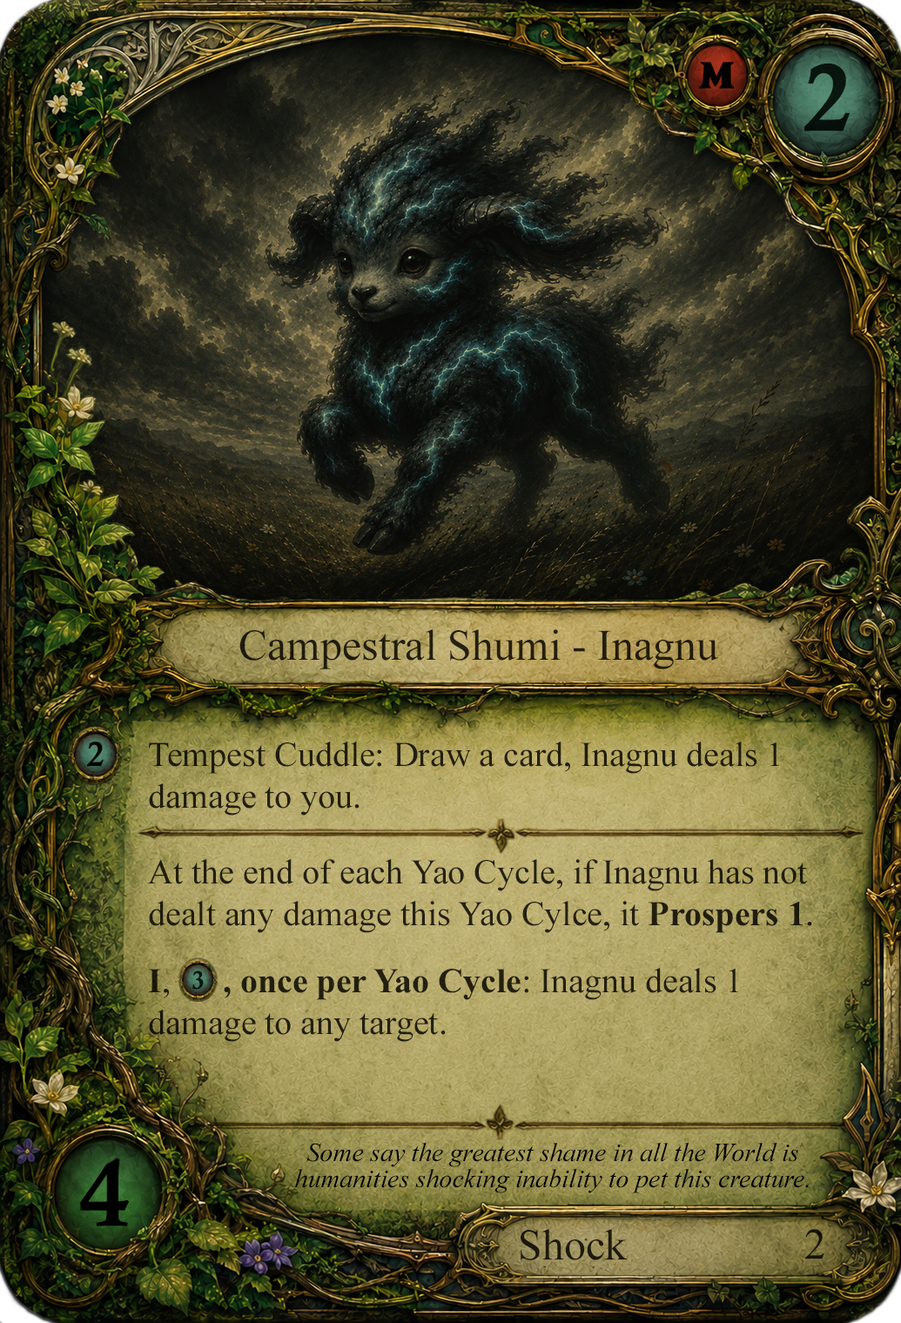
<style>
.page{position:relative;width:901px;height:1323px}
.page>*{position:absolute;margin:0}
.t1{font:95.8px "CalisMTBol";color:#000000}
.t2{font:43.5px "TimesNewRomanPSMT";color:#221d0d}
.t3{font:34.8px "CalisMTBol";color:#000000}
.t4{font:34.8px/41.8px "TimesNewRomanPSMT";color:#211e0d}
.t5{font:34.8px/41.8px "TimesNewRomanPSMT";color:#232010}
.t6{font:34.8px/41.8px "TimesNewRomanPS-BoldMT";color:#232010}
.t7{font:34.8px/41.8px "TimesNewRomanPSMT";color:#221e0f}
.t8{font:34.8px/41.8px "TimesNewRomanPS-BoldMT";color:#221e0f}
.t9{font:25.5px "CalisMTBol";color:#000000}
.t10{font:26.1px/26.1px "TimesNewRomanPS-ItalicMT";color:#000000}
.t11{font:43.5px "TimesNewRomanPSMT";color:#1c190d}
.t12{font:43.5px "TimesNewRomanPSMT";color:#000000}
</style>
<div class="page">
<p class="t1" style="left:804px;top:64px;width:47px;height:67px;opacity:0.9">2</p>
<p class="t2" style="left:239px;top:629px;width:479px;height:41px">Campestral Shumi - Inagnu</p>
<p class="t3" style="left:87px;top:742px;width:17px;height:25px">2</p>
<p class="t4" style="left:149px;top:742px;width:630px;height:74px">Tempest Cuddle: Draw a card, Inagnu deals 1<br>damage to you.</p>
<p class="t5" style="left:148px;top:859px;width:664px;height:74px">At the end of each Yao Cycle, if Inagnu has not<br>dealt any damage this Yao Cylce, it <span class="t6">Prospers 1</span>.</p>
<p class="t7" style="left:148px;top:968px;width:590px;height:74px"><span class="t8">I</span>,<span class="t8">      , once per Yao Cycle</span>: Inagnu deals 1 <br>damage to any target.</p>
<p class="t9" style="left:192px;top:971px;width:12px;height:19px;opacity:0.9">3</p>
<p class="t10" style="left:295px;top:1143px;width:514px;height:51px;text-align:center">Some say the greatest shame in all the World is humanities shocking inability to pet this creature.</p>
<p class="t1" style="left:80px;top:1158px;width:49px;height:69px">4</p>
<p class="t11" style="left:521px;top:1229px;width:107px;height:32px">Shock</p>
<p class="t12" style="left:805px;top:1229px;width:19px;height:30px;opacity:0.9">2</p>
</div>
